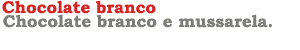
<style>
.page{position:relative;width:300px;height:50px;background:#ffffff}
.page>*{position:absolute;margin:0}
.t1{font:17px "BookmanOldStyle-Bold";color:#d42525}
.t2{font:17px "BookmanOldStyle-Bold";color:#7c7c79}
</style>
<div class="page">
<p class="t1" style="left:2px;top:0px;width:154px;height:14px">Chocolate branco</p>
<p class="t2" style="left:3px;top:14px;width:269px;height:14px">Chocolate branco e mussarela.</p>
</div>
